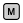
<style>
.page{position:relative;width:23px;height:23px;background:#ffffff}
.page>*{position:absolute;margin:0}
.t1{font:9px "ArialMT";color:#000000}
</style>
<div class="page">
<p class="t1" style="left:8px;top:8px;width:7px;height:7px">M</p>
</div>
